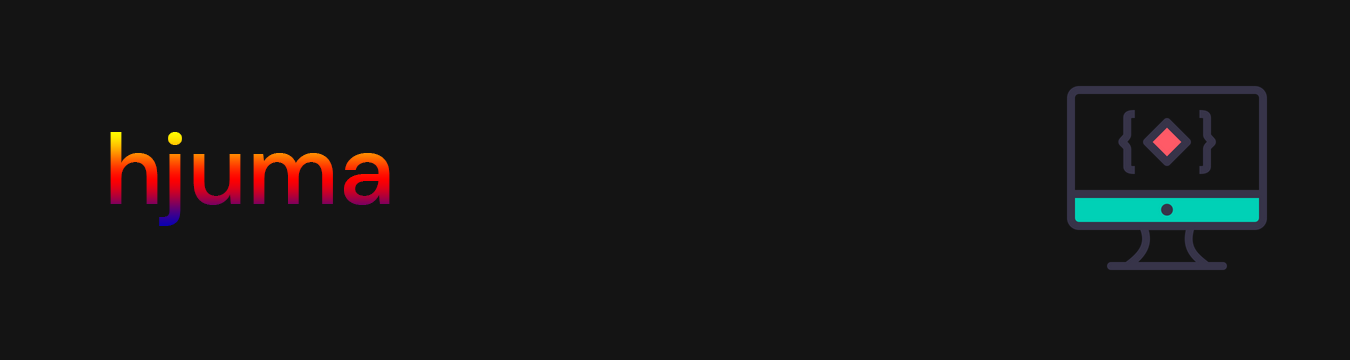
<style>
.page{position:relative;width:1350px;height:360px;background:#141414}
.page>*{position:absolute;margin:0}
.t1{font:100px "DMSans-Medium"}
</style>
<div class="page">
<p class="t1" style="left:110px;top:132px;width:280px;height:94px">hjuma</p>
</div>
